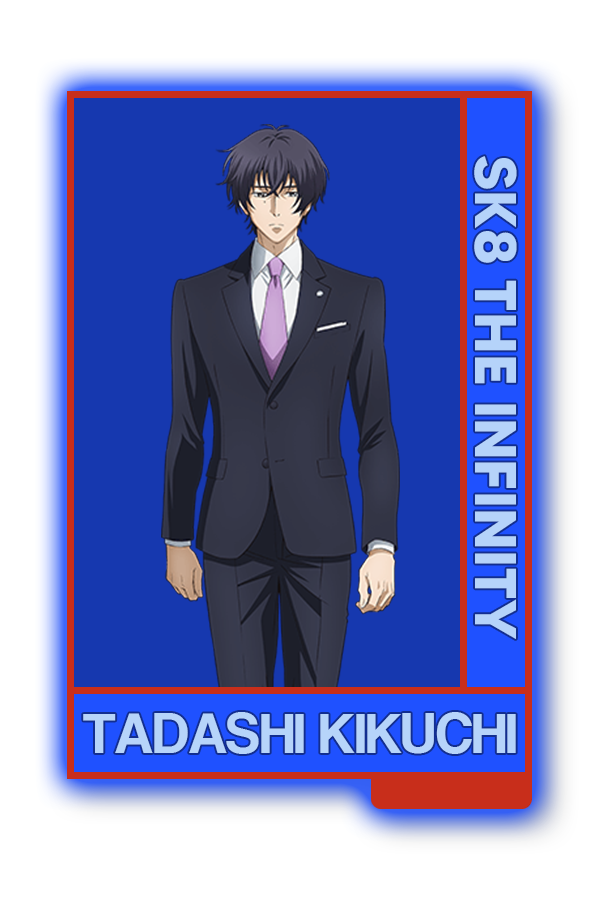
<style>
.page{position:relative;width:600px;height:900px;background:#1638af}
.page>*{position:absolute;margin:0}
.t1{font:58.4px "MADETOMMY-Bold";color:#b5d3fa}
.t2{font:58.8px "CoolveticaRg-Regular";color:#b6d4fa}
</style>
<div class="page">
<p class="t1" style="left:474px;top:156px;width:43px;height:483px;rotate:90deg">SK8 THE INFINITY</p>
<p class="t2" style="left:83px;top:712px;width:433px;height:42px">TADASHI KIKUCHI</p>
</div>
